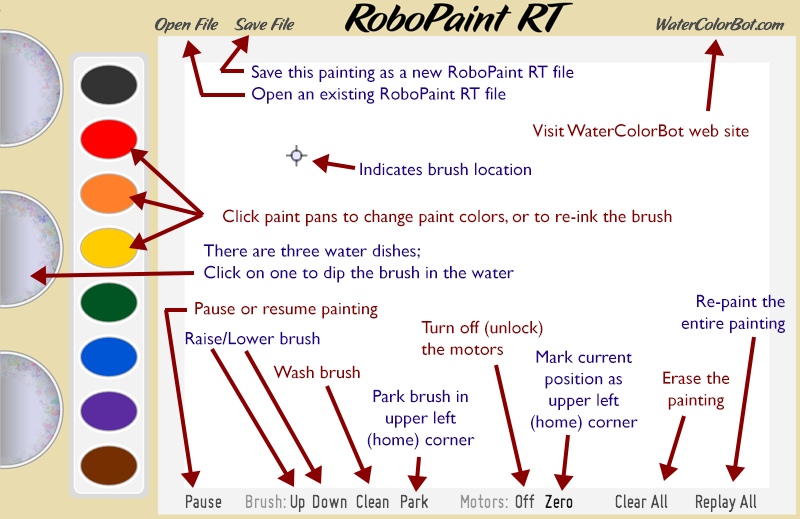
<style>
.page{position:relative;width:800px;height:519px;background:#ffffff}
.page>*{position:absolute;margin:0}
.t1{font:18px "GillSans";color:#24008a}
.t2{font:18px "GillSans";color:#8a0000}
.t3{font:18px "GillSans";color:#25008a}
</style>
<div class="page">
<p class="t1" style="left:252px;top:65px;width:322px;height:39px">Save this painting as a new RoboPaint RT file<br>Open an existing RoboPaint RT file</p>
<p class="t2" style="left:532px;top:124px;width:217px;height:13px">Visit WaterColorBot web site</p>
<p class="t1" style="left:360px;top:162px;width:171px;height:14px">Indicates brush location</p>
<p class="t2" style="left:223px;top:209px;width:449px;height:18px">Click paint pans to change paint colors, or to re-ink the brush</p>
<p class="t1" style="left:203px;top:244px;width:311px;height:39px">There are three water dishes;<br>Click on one to dip the brush in the water</p>
<p class="t3" style="left:681px;top:294px;width:104px;height:39px;text-align:right">Re-paint the<br>entire painting</p>
<p class="t2" style="left:195px;top:302px;width:183px;height:17px">Pause or resume painting</p>
<p class="t2" style="left:421px;top:320px;width:122px;height:35px">Turn off (unlock)<br>the motors</p>
<p class="t1" style="left:185px;top:331px;width:135px;height:14px">Raise/Lower brush</p>
<p class="t3" style="left:531px;top:350px;width:107px;height:82px;text-align:center">Mark current<br>position as<br>upper left<br>(home) corner</p>
<p class="t2" style="left:273px;top:365px;width:87px;height:14px">Wash brush</p>
<p class="t2" style="left:663px;top:371px;width:67px;height:39px;text-align:center">Erase the<br>painting</p>
<p class="t3" style="left:367px;top:389px;width:108px;height:61px;text-align:center">Park brush in<br>upper left<br>(home) corner</p>
</div>
